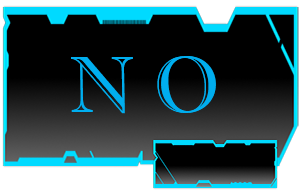
<style>
.page{position:relative;width:300px;height:193px;background:#000000}
.page>*{position:absolute;margin:0}
.t1{font:80px "ImprintMT-Shadow";color:#00aeef}
</style>
<div class="page">
<p class="t1" style="left:71px;top:56px;width:145px;height:58px">N O</p>
</div>
